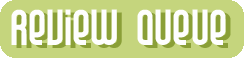
<style>
.page{position:relative;width:244px;height:58px;background:#c5d57d}
.page>*{position:absolute;margin:0}
.t1{font:48px "FalsePositiveBRK";color:#fefefe}
</style>
<div class="page">
<p class="t1" style="left:11px;top:9px;width:215px;height:36px">Review Queue</p>
</div>
